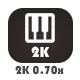
<style>
.page{position:relative;width:80px;height:80px;background:#ffffff}
.page>*{position:absolute;margin:0}
.t1{font:15px "Bauhaus93";color:#ffffff}
.t2{font:12px "Bauhaus93";color:#464646}
</style>
<div class="page">
<p class="t1" style="left:31px;top:46px;width:18px;height:11px">2K</p>
<p class="t2" style="left:15px;top:65px;width:49px;height:10px">2K 0.70x</p>
</div>
